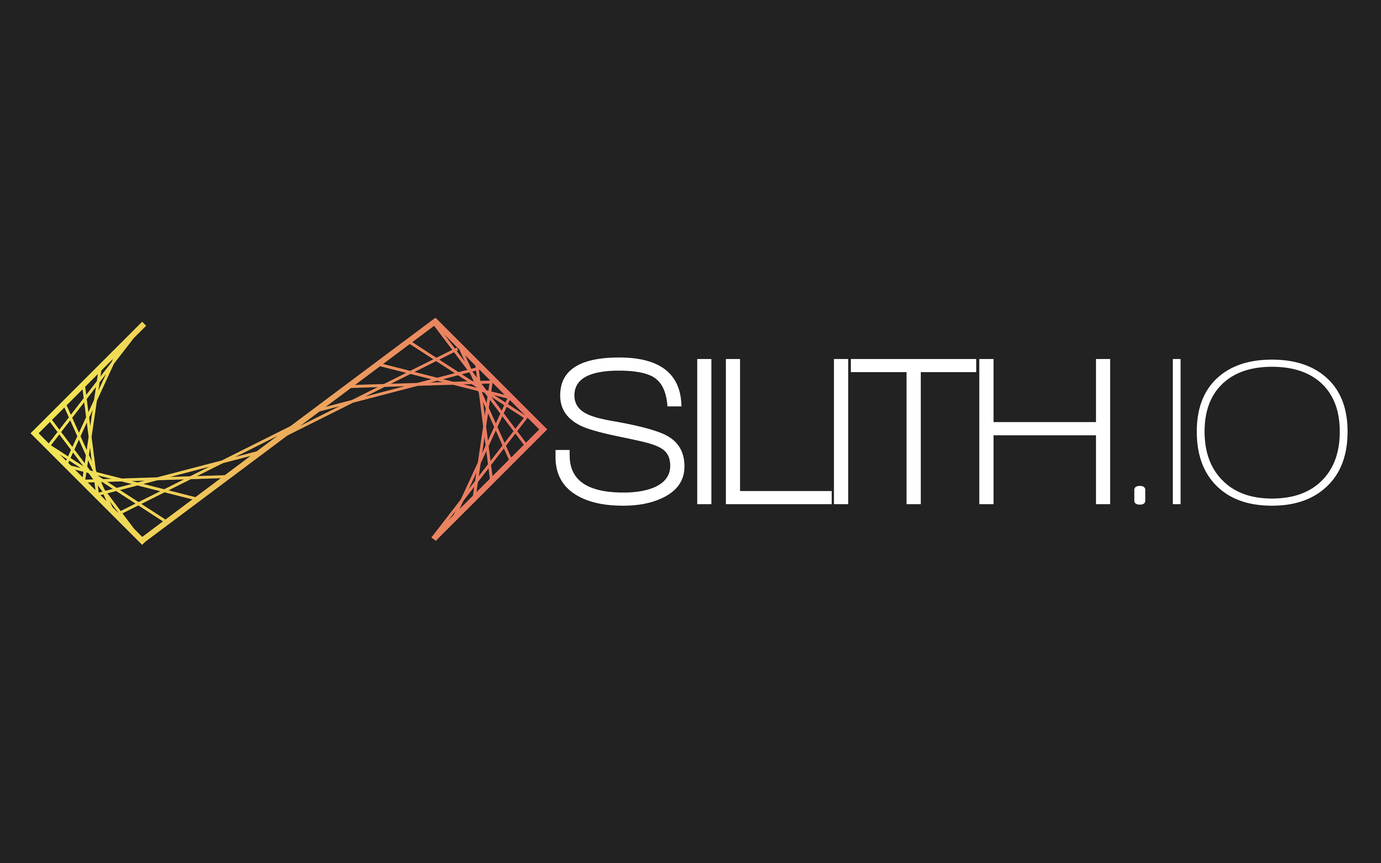
<style>
.page{position:relative;width:1381px;height:863px;background:#222222}
.page>*{position:absolute;margin:0}
.t1{font:214.1px "WalkwayUltraBold";color:#ffffff}
.t2{font:214.1px "WalkwayBold";color:#ffffff}
.t3{font:214.1px "WalkwaySemiBold";color:#ffffff}
</style>
<div class="page">
<p class="t1" style="left:556px;top:357px;width:792px;height:149px">SILITH<span class="t2">.</span><span class="t3">IO</span></p>
</div>
